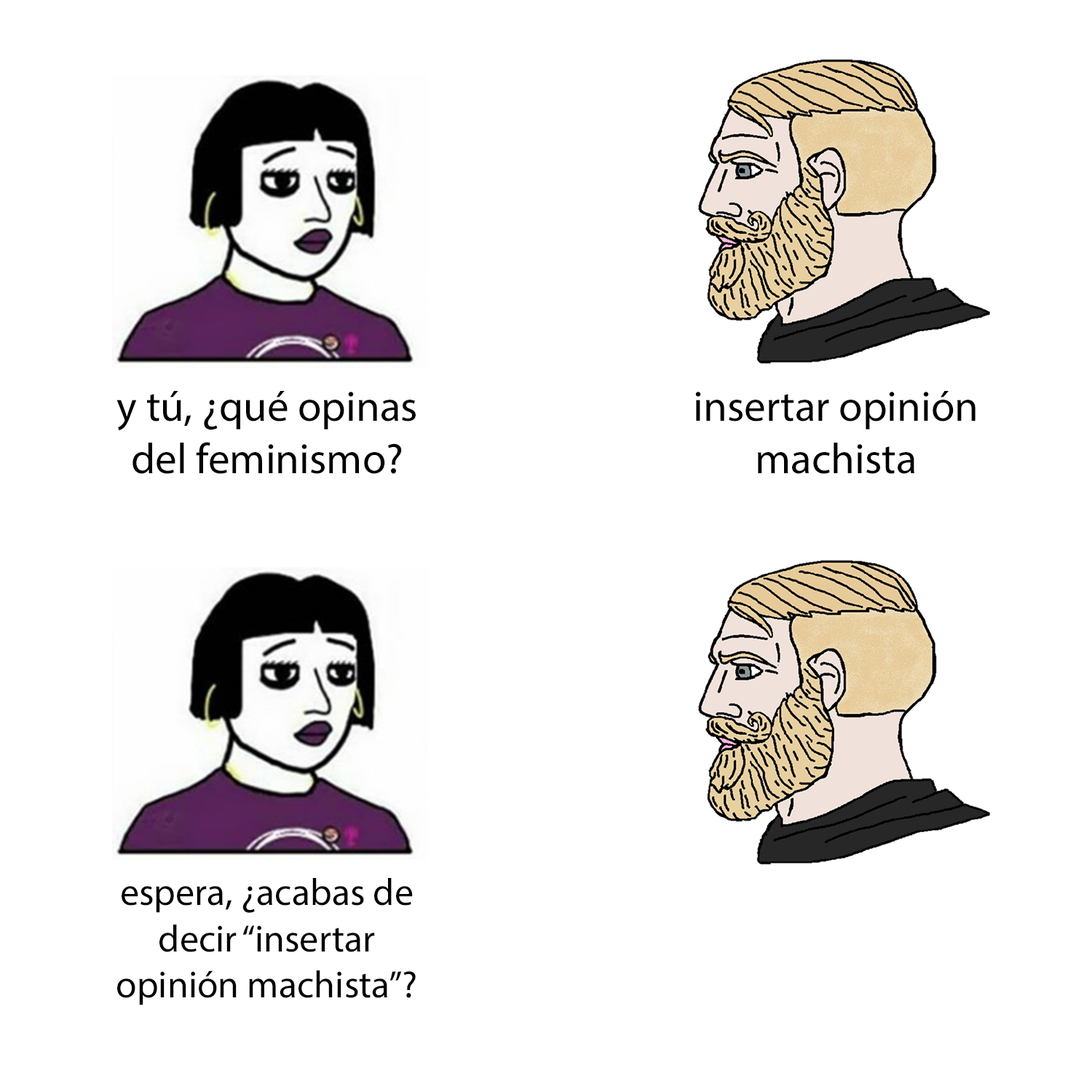
<style>
.page{position:relative;width:1092px;height:1092px;background:#ffffff}
.page>*{position:absolute;margin:0}
.t1{font:43px "MyriadPro-Regular";color:#000000}
.t2{font:38px "MyriadPro-Regular";color:#000000}
</style>
<div class="page">
<p class="t1" style="left:116px;top:391px;width:300px;height:83px;text-align:center">y tú, ¿qué opinas<br>del feminismo?</p>
<p class="t1" style="left:695px;top:391px;width:281px;height:83px;text-align:center">insertar opinión<br>machista</p>
<p class="t2" style="left:117px;top:878px;width:299px;height:127px;text-align:center">espera, ¿acabas de<br>decir “insertar<br>opinión machista”?</p>
</div>
